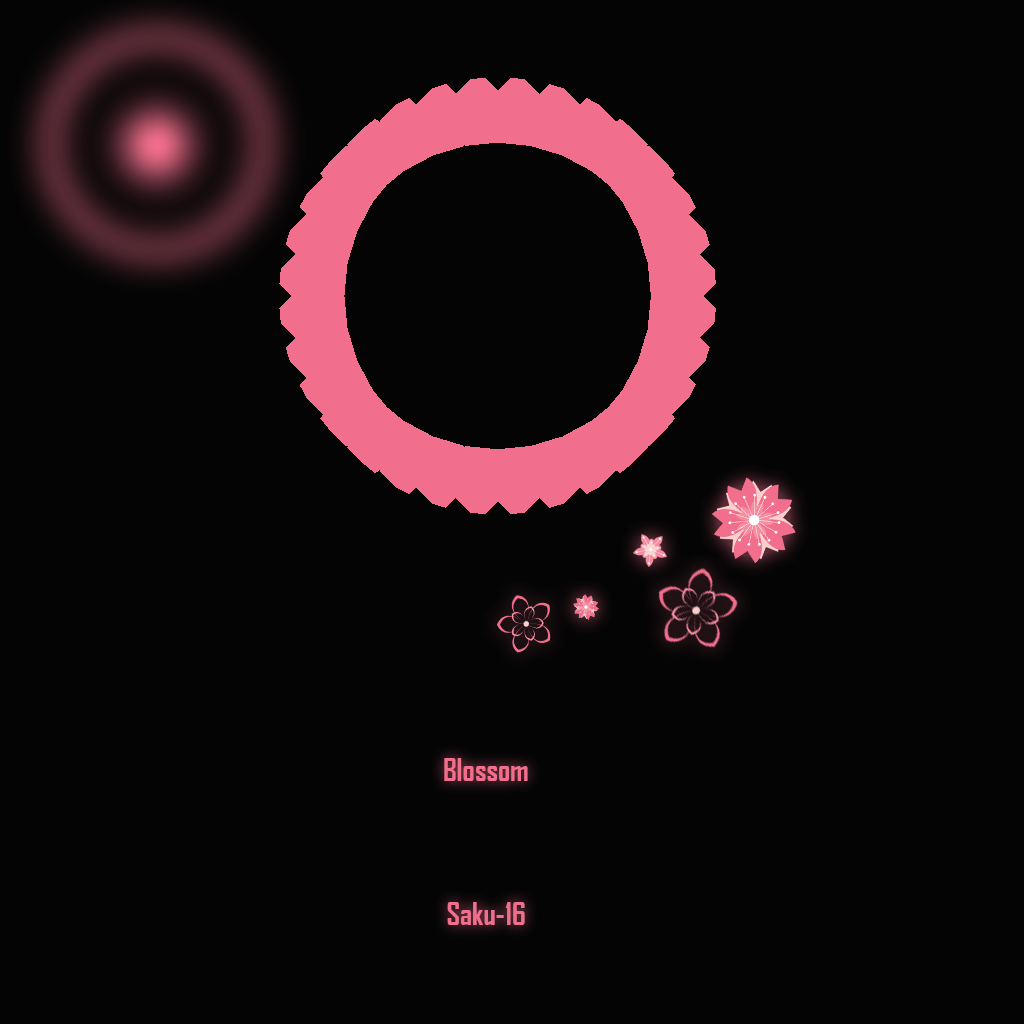
<style>
.page{position:relative;width:1024px;height:1024px;background:#040404}
.page>*{position:absolute;margin:0}
.t1{font:30px "AgencyFB-Bold";color:#f16e8c}
</style>
<div class="page">
<p class="t1" style="left:444px;top:758px;width:84px;height:23px">Blossom</p>
<p class="t1" style="left:447px;top:902px;width:78px;height:23px">Saku-16</p>
</div>
